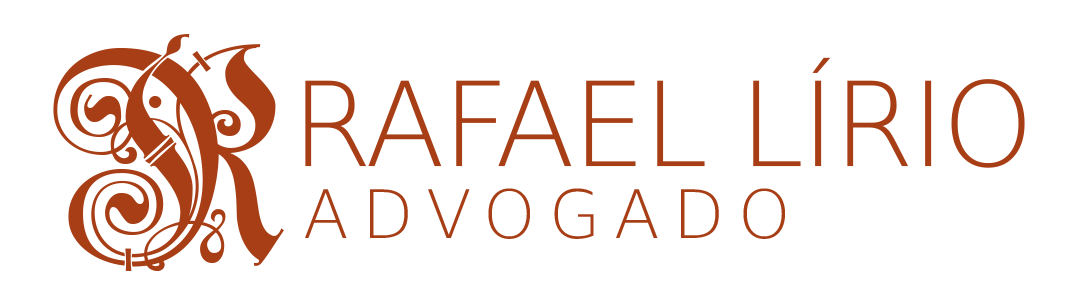
<style>
.page{position:relative;width:1080px;height:300px;background:#ffffff}
.page>*{position:absolute;margin:0}
.t1{font:242.8px "JenaGotisch";color:#a73e16;text-transform:uppercase}
.t2{font:116.7px "DejaVuSans-ExtraLight";letter-spacing:-0.025em;color:#a73e16;text-transform:uppercase}
.t3{font:66.7px "DejaVuSans-ExtraLight";letter-spacing:0.2em;color:#a73e16;text-transform:uppercase}
</style>
<div class="page">
<p class="t1" style="left:53px;top:34px;width:231px;height:237px">R</p>
<p class="t2" style="left:305px;top:57px;width:720px;height:111px">Rafael Lírio</p>
<p class="t3" style="left:305px;top:188px;width:480px;height:51px">Advogado</p>
</div>
